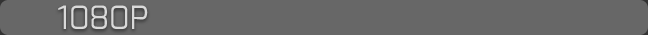
<style>
.page{position:relative;width:648px;height:35px;background:#676767}
.page>*{position:absolute;margin:0}
.t1{font:32px "Exo-Regular";color:#d9d9d9;text-transform:uppercase}
</style>
<div class="page">
<p class="t1" style="left:58px;top:5px;width:90px;height:24px">1080p</p>
</div>
